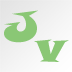
<style>
.page{position:relative;width:72px;height:72px}
.page>*{position:absolute;margin:0}
.t1{font:42.2px "SnapITC-Regular";color:#8ac876}
</style>
<div class="page">
<p class="t1" style="left:4px;top:10px;width:34px;height:33px">J</p>
<p class="t1" style="left:34px;top:39px;width:35px;height:23px">v</p>
</div>
